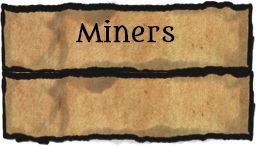
<style>
.page{position:relative;width:256px;height:146px}
.page>*{position:absolute;margin:0}
.t1{font:25px "Metamorphous";color:#000000;font-weight:bold}
</style>
<div class="page">
<p class="t1" style="left:76px;top:20px;width:99px;height:23px">Miners</p>
</div>
